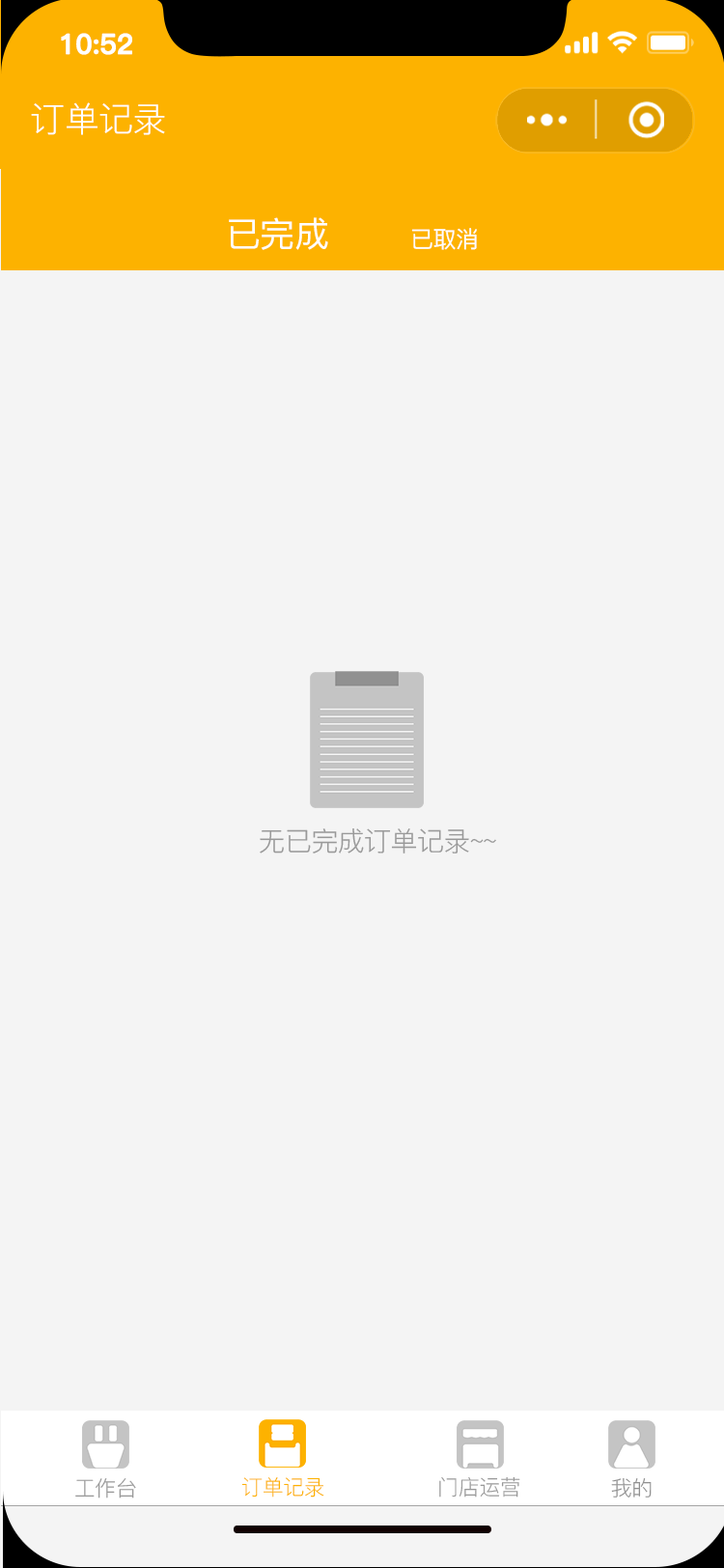
<style>
.page{position:relative;width:724px;height:1568px;background:#f4f4f4}
.page>*{position:absolute;margin:0}
.t1{font:27.5px "PingFang-SC-Bold";letter-spacing:-0.02em;color:#ffffff;font-weight:bold}
.t2{font:34.8px "PingFang-SC-Regular";letter-spacing:-0.02em;color:#ffffff}
.t3{font:34.8px "PingFang-SC-Medium";letter-spacing:-0.02em;color:#fefefe}
.t4{font:23.2px "PingFang-SC-Medium";letter-spacing:-0.02em;color:#fefefe}
.t5{font:27px "PingFang-SC-Regular";letter-spacing:-0.02em;color:#999999}
.t6{font:21.2px "PingFang-SC-Regular";letter-spacing:-0.02em;color:#999999}
.t7{font:21.2px "PingFang-SC-Regular";letter-spacing:-0.02em;color:#fdb200}
.t8{font:21.2px "PingFang-SC-Regular";letter-spacing:-0.02em;color:#919191}
</style>
<div class="page">
<p class="t1" style="left:61px;top:33px;width:71px;height:22px">10:52</p>
<p class="t2" style="left:31px;top:102px;width:134px;height:33px">订单记录</p>
<p class="t3" style="left:229px;top:217px;width:99px;height:33px">已完成</p>
<p class="t4" style="left:411px;top:228px;width:66px;height:22px">已取消</p>
<p class="t5" style="left:260px;top:828px;width:236px;height:26px">无已完成订单记录~~</p>
<p class="t6" style="left:75px;top:1478px;width:61px;height:20px">工作台</p>
<p class="t7" style="left:241px;top:1477px;width:83px;height:21px">订单记录</p>
<p class="t6" style="left:439px;top:1476px;width:81px;height:22px">门店运营</p>
<p class="t8" style="left:611px;top:1478px;width:41px;height:20px">我的</p>
</div>
